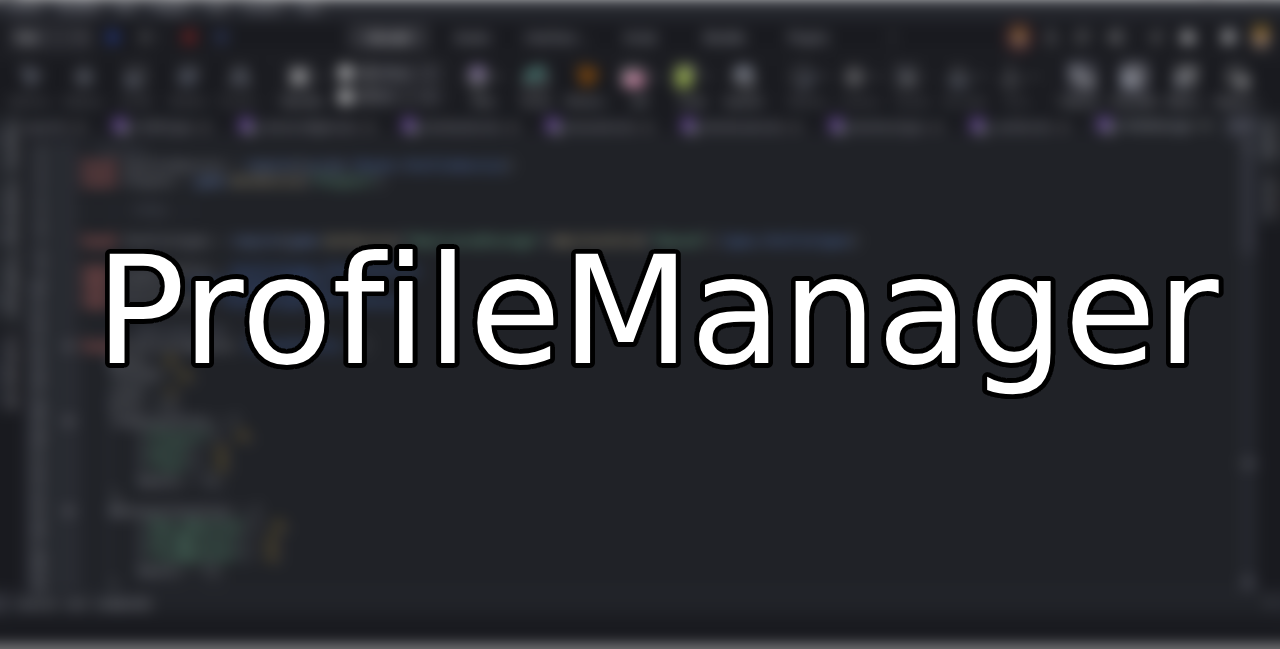
<style>
.page{position:relative;width:1280px;height:649px;background:#202227}
.page>*{position:absolute;margin:0}
.t1{font:150px "DejaVuSans";color:#ffffff}
</style>
<div class="page">
<p class="t1" style="left:109px;top:249px;width:1110px;height:146px">ProfileManager</p>
</div>
